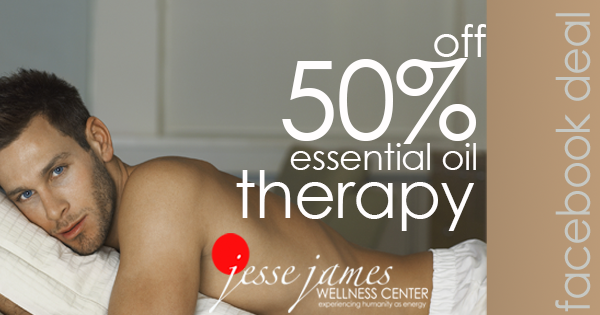
<style>
.page{position:relative;width:600px;height:315px}
.page>*{position:absolute;margin:0}
.t1{font:46.3px "CenturyGothic";letter-spacing:-0.02em;color:#c6c8c3;scale:0.93 1}
.t2{font:43.6px "CenturyGothic";letter-spacing:-0.02em;color:#fffdfd}
.t3{font:109px "CenturyGothic";letter-spacing:-0.02em;color:#fffdfd}
.t4{font:36.3px "CenturyGothic";letter-spacing:-0.02em;color:#fffdfd}
.t5{font:65.4px "CenturyGothic";letter-spacing:-0.02em;color:#fffdfd}
</style>
<div class="page">
<p class="t1" style="left:555px;top:13px;width:36px;height:299px;rotate:-90deg">facebook deal</p>
<p class="t2" style="left:434px;top:24px;width:52px;height:33px">off</p>
<p class="t3" style="left:282px;top:58px;width:194px;height:86px">50%</p>
<p class="t4" style="left:290px;top:143px;width:186px;height:27px">essential oil</p>
<p class="t5" style="left:236px;top:170px;width:238px;height:61px">therapy</p>
</div>
